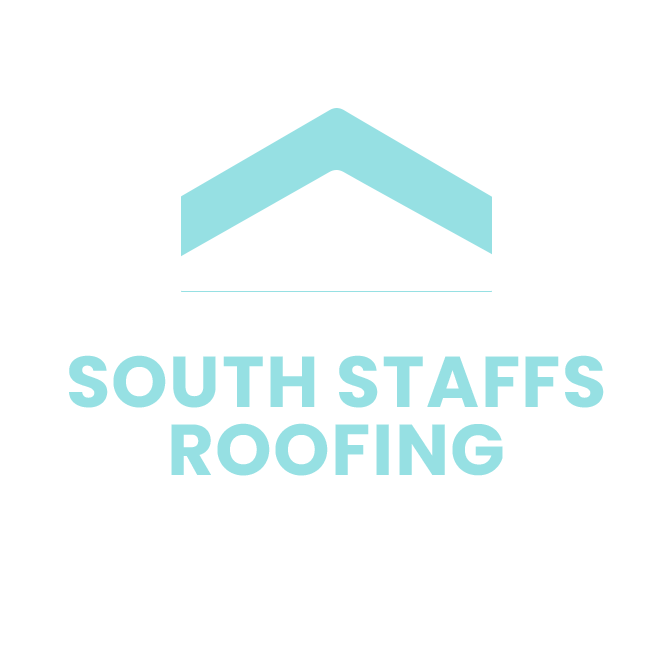
<style>
.page{position:relative;width:672px;height:672px;background:#ffffff}
.page>*{position:absolute;margin:0}
.t1{font:72px/68px "Poppins-Bold";letter-spacing:0.02em;color:#96e0e3}
</style>
<div class="page">
<p class="t1" style="left:69px;top:355px;width:535px;height:121px;text-align:center">SOUTH STAFFS<br>ROOFING</p>
</div>
